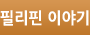
<style>
.page{position:relative;width:90px;height:35px}
.page>*{position:absolute;margin:0}
.t1{font:16px "NanumGothicExtraBold";color:#ffffff;scale:0.95 1}
</style>
<div class="page">
<p class="t1" style="left:0px;top:10px;width:89px;height:16px">필리핀 이야기</p>
</div>
